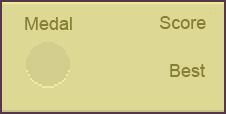
<style>
.page{position:relative;width:226px;height:114px;background:#ded895}
.page>*{position:absolute;margin:0}
.t1{font:18px "ArialMT";color:#857e34}
</style>
<div class="page">
<p class="t1" style="left:25px;top:17px;width:47px;height:13px">Medal</p>
<p class="t1" style="left:160px;top:16px;width:46px;height:13px">Score</p>
<p class="t1" style="left:170px;top:64px;width:35px;height:13px">Best</p>
</div>
